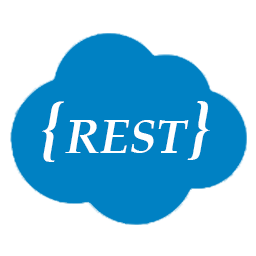
<style>
.page{position:relative;width:256px;height:256px;background:#ffffff}
.page>*{position:absolute;margin:0}
.t1{font:48px "Palatino-BoldItalic";color:#ffffff}
.t2{font:72px "Palatino-BoldItalic";color:#ffffff}
</style>
<div class="page">
<p class="t1" style="left:42px;top:101px;width:168px;height:61px"><span class="t2">{</span>REST<span class="t2">}</span></p>
</div>
